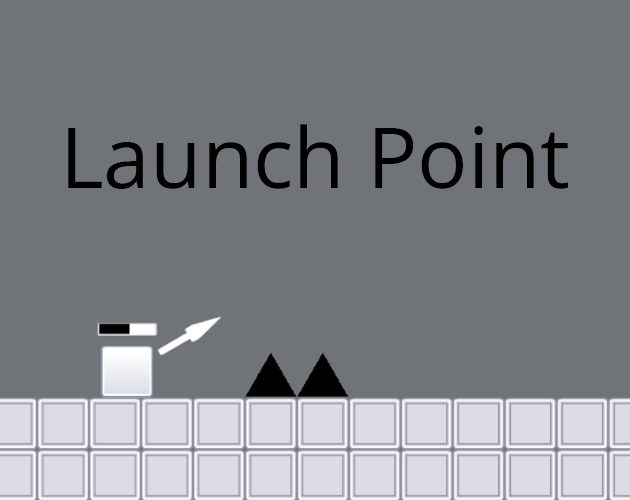
<style>
.page{position:relative;width:630px;height:500px;background:#707378}
.page>*{position:absolute;margin:0}
.t1{font:84px "OpenSans-Regular";color:#000000}
</style>
<div class="page">
<p class="t1" style="left:68px;top:124px;width:500px;height:65px">Launch Point</p>
</div>
